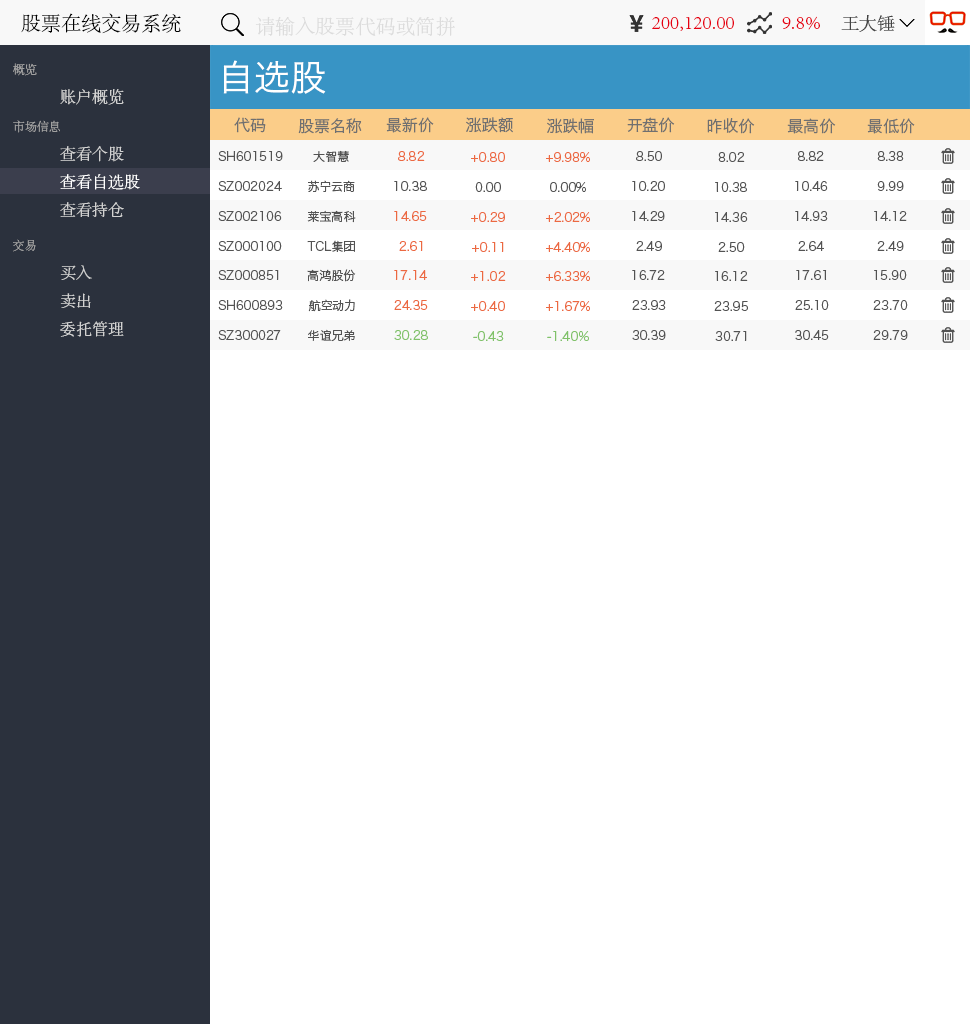
<style>
.page{position:relative;width:970px;height:1024px;background:#ffffff}
.page>*{position:absolute;margin:0}
.t1{font:20px "AdobeSongStd-Light";color:#000000}
.t2{font:20px "AdobeSongStd-Light";color:#dcdcdc}
.t3{font:20px "AdobeSongStd-Light";color:#e60012}
.t4{font:18px "AdobeSongStd-Light";color:#434343}
.t5{font:12px "AdobeSongStd-Light";color:#a0a0a0}
.t6{font:36px "HiraginoSansGB-W3";color:#ffffff}
.t7{font:16px "AdobeSongStd-Light";color:#d2d2d2}
.t8{font:16px "HiraginoSansGB-W3";color:#707070}
.t9{font:12px "HiraginoSansGB-W3";color:#535353}
.t10{font:12px "HiraginoSansGB-W3";color:#ec6941}
.t11{font:16px "AdobeSongStd-Light";color:#ffffff}
.t12{font:12px "HiraginoSansGB-W3";color:#80c269}
</style>
<div class="page">
<p class="t1" style="left:21px;top:13px;width:160px;height:21px">股票在线交易系统</p>
<p class="t2" style="left:255px;top:16px;width:200px;height:21px">请输入股票代码或简拼</p>
<p class="t3" style="left:652px;top:17px;width:82px;height:14px">200,120.00</p>
<p class="t3" style="left:782px;top:16px;width:38px;height:14px">9.8%</p>
<p class="t4" style="left:841px;top:15px;width:54px;height:17px">王大锤</p>
<p class="t5" style="left:13px;top:63px;width:24px;height:13px">概览</p>
<p class="t6" style="left:223px;top:60px;width:103px;height:34px">自选股</p>
<p class="t7" style="left:60px;top:89px;width:64px;height:16px">账户概览</p>
<p class="t5" style="left:13px;top:120px;width:47px;height:13px">市场信息</p>
<p class="t8" style="left:234px;top:117px;width:32px;height:16px">代码</p>
<p class="t8" style="left:298px;top:118px;width:64px;height:16px">股票名称</p>
<p class="t8" style="left:386px;top:117px;width:48px;height:16px">最新价</p>
<p class="t8" style="left:466px;top:117px;width:47px;height:16px">涨跌额</p>
<p class="t8" style="left:547px;top:118px;width:47px;height:16px">涨跌幅</p>
<p class="t8" style="left:627px;top:117px;width:48px;height:16px">开盘价</p>
<p class="t8" style="left:707px;top:118px;width:48px;height:16px">昨收价</p>
<p class="t8" style="left:787px;top:118px;width:49px;height:16px">最高价</p>
<p class="t8" style="left:867px;top:118px;width:48px;height:16px">最低价</p>
<p class="t7" style="left:60px;top:146px;width:64px;height:16px">查看个股</p>
<p class="t9" style="left:313px;top:150px;width:36px;height:12px">大智慧</p>
<p class="t9" style="left:218px;top:151px;width:65px;height:10px">SH601519</p>
<p class="t10" style="left:398px;top:151px;width:27px;height:10px">8.82</p>
<p class="t10" style="left:471px;top:152px;width:34px;height:10px">+0.80</p>
<p class="t10" style="left:546px;top:152px;width:44px;height:10px">+9.98%</p>
<p class="t9" style="left:636px;top:151px;width:26px;height:10px">8.50</p>
<p class="t9" style="left:718px;top:152px;width:27px;height:10px">8.02</p>
<p class="t9" style="left:798px;top:151px;width:26px;height:10px">8.82</p>
<p class="t9" style="left:877px;top:151px;width:27px;height:10px">8.38</p>
<p class="t11" style="left:60px;top:174px;width:80px;height:16px">查看自选股</p>
<p class="t9" style="left:218px;top:181px;width:64px;height:10px">SZ002024</p>
<p class="t9" style="left:308px;top:180px;width:47px;height:12px">苏宁云商</p>
<p class="t9" style="left:394px;top:181px;width:33px;height:10px">10.38</p>
<p class="t9" style="left:475px;top:182px;width:26px;height:10px">0.00</p>
<p class="t9" style="left:550px;top:182px;width:36px;height:10px">0.00%</p>
<p class="t9" style="left:632px;top:181px;width:33px;height:10px">10.20</p>
<p class="t9" style="left:715px;top:182px;width:32px;height:10px">10.38</p>
<p class="t9" style="left:795px;top:181px;width:33px;height:10px">10.46</p>
<p class="t9" style="left:877px;top:181px;width:27px;height:10px">9.99</p>
<p class="t7" style="left:60px;top:202px;width:64px;height:15px">查看持仓</p>
<p class="t9" style="left:218px;top:211px;width:64px;height:10px">SZ002106</p>
<p class="t9" style="left:307px;top:210px;width:49px;height:13px">莱宝高科</p>
<p class="t10" style="left:394px;top:211px;width:33px;height:10px">14.65</p>
<p class="t10" style="left:471px;top:212px;width:34px;height:10px">+0.29</p>
<p class="t10" style="left:546px;top:212px;width:44px;height:10px">+2.02%</p>
<p class="t9" style="left:632px;top:211px;width:33px;height:10px">14.29</p>
<p class="t9" style="left:715px;top:212px;width:33px;height:10px">14.36</p>
<p class="t9" style="left:795px;top:211px;width:33px;height:10px">14.93</p>
<p class="t9" style="left:874px;top:211px;width:33px;height:10px">14.12</p>
<p class="t5" style="left:13px;top:239px;width:23px;height:13px">交易</p>
<p class="t9" style="left:218px;top:241px;width:64px;height:10px">SZ000100</p>
<p class="t9" style="left:307px;top:240px;width:48px;height:12px">TCL集团</p>
<p class="t10" style="left:399px;top:241px;width:24px;height:10px">2.61</p>
<p class="t10" style="left:472px;top:242px;width:32px;height:10px">+0.11</p>
<p class="t10" style="left:546px;top:242px;width:44px;height:10px">+4.40%</p>
<p class="t9" style="left:636px;top:241px;width:26px;height:10px">2.49</p>
<p class="t9" style="left:718px;top:242px;width:27px;height:10px">2.50</p>
<p class="t9" style="left:798px;top:241px;width:26px;height:10px">2.64</p>
<p class="t9" style="left:877px;top:241px;width:27px;height:10px">2.49</p>
<p class="t7" style="left:60px;top:265px;width:32px;height:15px">买入</p>
<p class="t9" style="left:218px;top:270px;width:61px;height:10px">SZ000851</p>
<p class="t9" style="left:307px;top:269px;width:49px;height:13px">高鸿股份</p>
<p class="t10" style="left:394px;top:270px;width:33px;height:10px">17.14</p>
<p class="t9" style="left:632px;top:270px;width:33px;height:10px">16.72</p>
<p class="t9" style="left:796px;top:270px;width:31px;height:10px">17.61</p>
<p class="t9" style="left:874px;top:270px;width:33px;height:10px">15.90</p>
<p class="t10" style="left:471px;top:271px;width:35px;height:10px">+1.02</p>
<p class="t10" style="left:546px;top:271px;width:44px;height:10px">+6.33%</p>
<p class="t9" style="left:715px;top:271px;width:33px;height:10px">16.12</p>
<p class="t7" style="left:60px;top:293px;width:31px;height:15px">卖出</p>
<p class="t9" style="left:218px;top:300px;width:65px;height:10px">SH600893</p>
<p class="t9" style="left:308px;top:299px;width:47px;height:13px">航空动力</p>
<p class="t10" style="left:394px;top:300px;width:34px;height:10px">24.35</p>
<p class="t10" style="left:471px;top:301px;width:34px;height:10px">+0.40</p>
<p class="t10" style="left:546px;top:301px;width:44px;height:10px">+1.67%</p>
<p class="t9" style="left:632px;top:300px;width:34px;height:10px">23.93</p>
<p class="t9" style="left:714px;top:301px;width:34px;height:10px">23.95</p>
<p class="t9" style="left:795px;top:300px;width:34px;height:10px">25.10</p>
<p class="t9" style="left:873px;top:300px;width:35px;height:10px">23.70</p>
<p class="t7" style="left:60px;top:321px;width:64px;height:16px">委托管理</p>
<p class="t9" style="left:308px;top:329px;width:47px;height:13px">华谊兄弟</p>
<p class="t9" style="left:218px;top:330px;width:63px;height:10px">SZ300027</p>
<p class="t12" style="left:394px;top:330px;width:34px;height:10px">30.28</p>
<p class="t12" style="left:473px;top:331px;width:31px;height:10px">-0.43</p>
<p class="t12" style="left:547px;top:331px;width:42px;height:10px">-1.40%</p>
<p class="t9" style="left:632px;top:330px;width:34px;height:10px">30.39</p>
<p class="t9" style="left:715px;top:331px;width:32px;height:10px">30.71</p>
<p class="t9" style="left:795px;top:330px;width:34px;height:10px">30.45</p>
<p class="t9" style="left:873px;top:330px;width:35px;height:10px">29.79</p>
</div>
